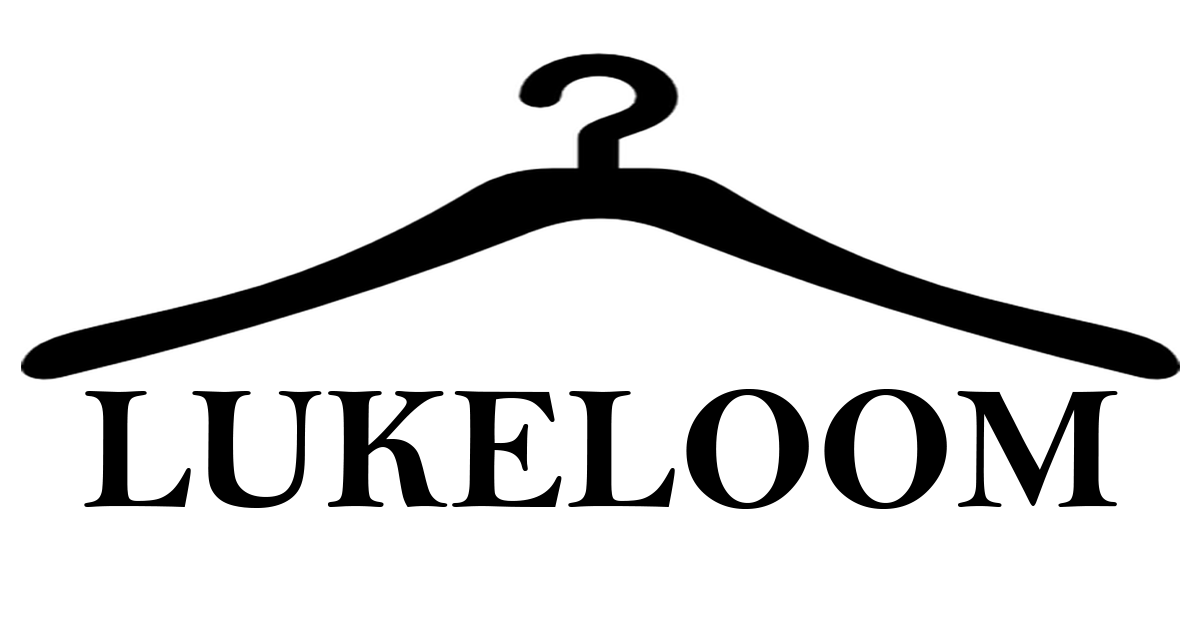
<style>
.page{position:relative;width:1200px;height:630px;background:#ffffff}
.page>*{position:absolute;margin:0}
.t1{font:178.3px "BellMTBold";color:#000000}
</style>
<div class="page">
<p class="t1" style="left:84px;top:389px;width:1034px;height:120px">LUKELOOM</p>
</div>
